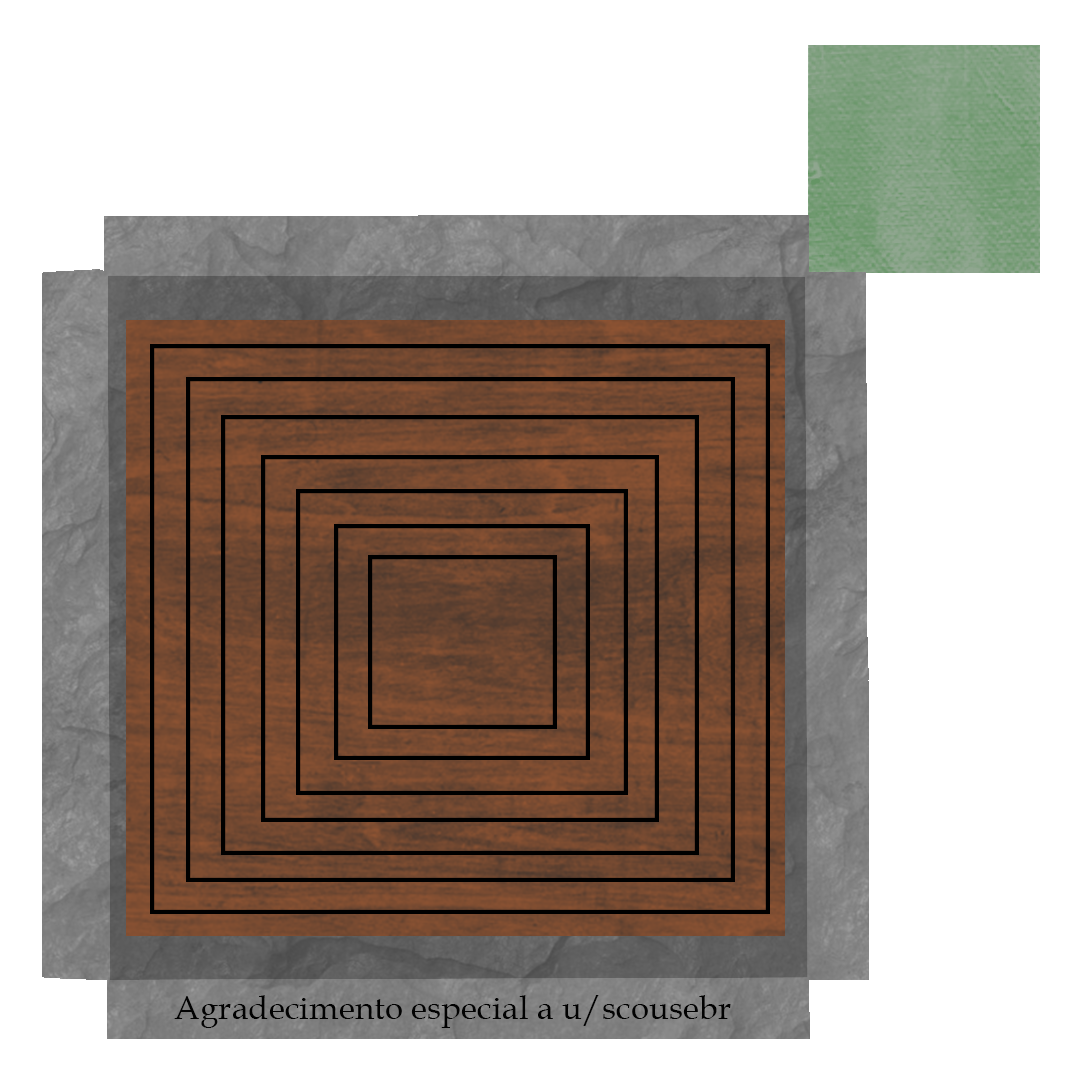
<style>
.page{position:relative;width:1080px;height:1080px;background:#ffffff}
.page>*{position:absolute;margin:0}
.t1{font:33.3px "BookAntiqua";color:#020202}
</style>
<div class="page">
<p class="t1" style="left:174px;top:995px;width:557px;height:33px">Agradecimento especial a u/scousebr<br>[–]from scousebr</p>
</div>
